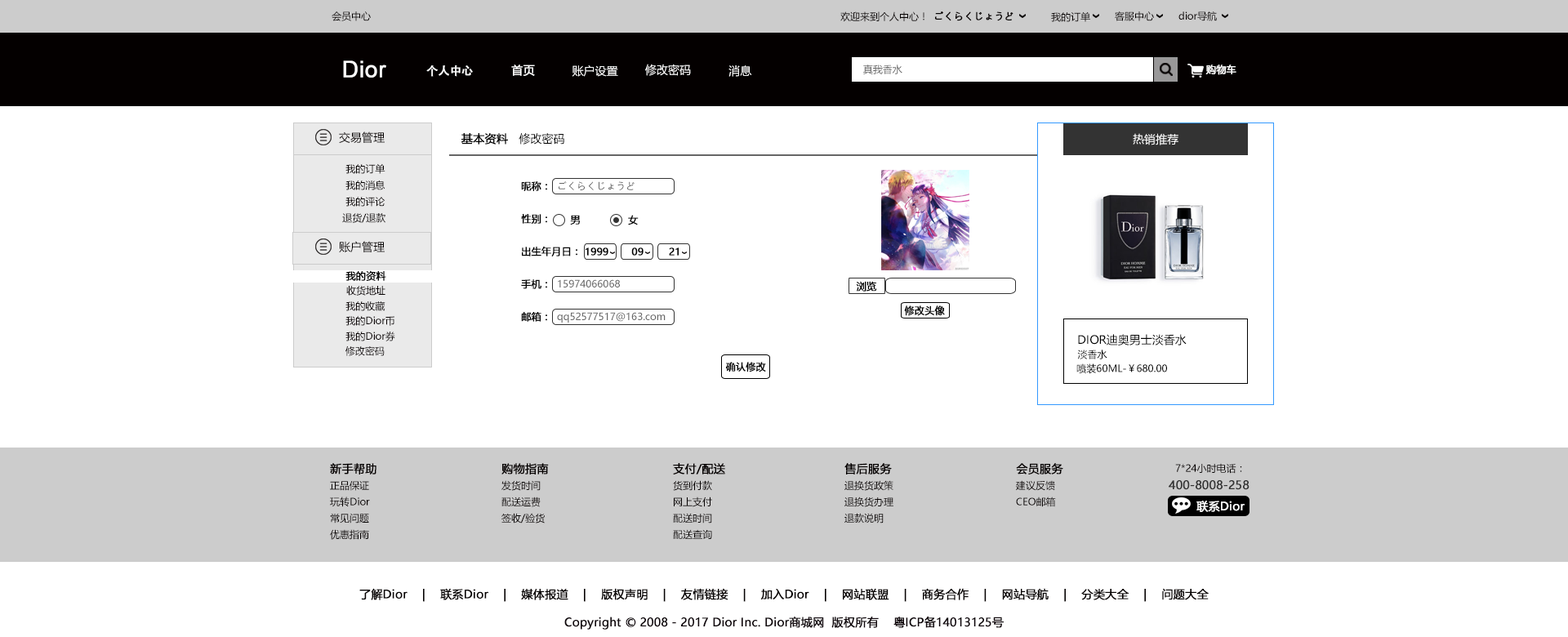
<style>
.page{position:relative;width:1568px;height:637px;background:#ffffff}
.page>*{position:absolute;margin:0}
.t1{font:9.8px "MicrosoftYaHei";color:#040000}
.t2{font:9.8px "MicrosoftYaHei";color:#040000;font-weight:bold}
.t3{font:22.9px "ArialMT";color:#ffffff;font-weight:bold}
.t4{font:11.4px "AdobeHeitiStd-Regular";color:#ffffff;font-weight:bold}
.t5{font:11.4px "MicrosoftYaHei";color:#ffffff;font-weight:bold}
.t6{font:11.4px "MicrosoftYaHei";color:#ffffff}
.t7{font:9.8px "MicrosoftYaHei";color:#666666}
.t8{font:9.8px "MicrosoftYaHei";color:#ffffff;font-weight:bold}
.t9{font:11.4px "MicrosoftYaHei";color:#040000}
.t10{font:11.4px "MicrosoftYaHei";color:#000000;font-weight:bold}
.t11{font:11.4px "MicrosoftYaHei";color:#000000}
.t12{font:9.8px "MicrosoftYaHei";color:#000000;font-weight:bold}
.t13{font:9.8px "MicrosoftYaHei";color:#010101;font-weight:bold}
.t14{font:9.8px "MicrosoftYaHei";color:#060001}
.t15{font:9.8px "MicrosoftYaHei";color:#000000}
.t16{font:11.4px "MicrosoftYaHei";color:#040000;font-weight:bold}
.t17{font:11.4px "MicrosoftYaHei";color:#333333;font-weight:bold}
</style>
<div class="page">
<p class="t1" style="left:332px;top:11px;width:39px;height:10px">会员中心</p>
<p class="t1" style="left:840px;top:11px;width:84px;height:11px">欢迎来到个人中心！</p>
<p class="t2" style="left:935px;top:11px;width:78px;height:10px">ごくらくじょうど</p>
<p class="t1" style="left:1051px;top:11px;width:39px;height:11px">我的订单</p>
<p class="t1" style="left:1115px;top:11px;width:39px;height:10px">客服中心</p>
<p class="t1" style="left:1178px;top:11px;width:39px;height:10px">dior导航</p>
<p class="t3" style="left:343px;top:60px;width:43px;height:18px">Dior</p>
<p class="t4" style="left:426px;top:65px;width:47px;height:12px">个人中心</p>
<p class="t5" style="left:511px;top:65px;width:24px;height:11px">首页</p>
<p class="t6" style="left:572px;top:65px;width:46px;height:12px">账户设置</p>
<p class="t6" style="left:645px;top:64px;width:46px;height:12px">修改密码</p>
<p class="t6" style="left:728px;top:65px;width:24px;height:12px">消息</p>
<p class="t7" style="left:863px;top:65px;width:39px;height:9px">真我香水</p>
<p class="t8" style="left:1205px;top:65px;width:31px;height:10px">购物车</p>
<p class="t9" style="left:339px;top:131px;width:46px;height:12px">交易管理</p>
<p class="t10" style="left:461px;top:133px;width:47px;height:12px">基本资料</p>
<p class="t11" style="left:519px;top:133px;width:45px;height:12px">修改密码</p>
<p class="t6" style="left:1133px;top:133px;width:45px;height:12px">热销推荐</p>
<p class="t1" style="left:345px;top:163px;width:40px;height:11px">我的订单</p>
<p class="t1" style="left:345px;top:180px;width:40px;height:10px">我的消息</p>
<p class="t12" style="left:521px;top:181px;width:26px;height:10px">昵称：</p>
<p class="t7" style="left:559px;top:181px;width:76px;height:9px">ごくらくじょうど</p>
<p class="t1" style="left:345px;top:197px;width:40px;height:10px">我的评论</p>
<p class="t1" style="left:342px;top:213px;width:43px;height:10px">退货/退款</p>
<p class="t12" style="left:521px;top:214px;width:26px;height:10px">性别：</p>
<p class="t12" style="left:570px;top:215px;width:10px;height:10px">男</p>
<p class="t12" style="left:628px;top:215px;width:11px;height:10px">女</p>
<p class="t9" style="left:339px;top:241px;width:46px;height:11px">账户管理</p>
<p class="t12" style="left:522px;top:246px;width:55px;height:10px">出生年月日：</p>
<p class="t12" style="left:586px;top:247px;width:22px;height:9px">1999</p>
<p class="t12" style="left:631px;top:247px;width:13px;height:9px">09</p>
<p class="t12" style="left:669px;top:247px;width:10px;height:9px">21</p>
<p class="t13" style="left:345px;top:270px;width:41px;height:11px">我的资料</p>
<p class="t12" style="left:521px;top:279px;width:26px;height:10px">手机：</p>
<p class="t7" style="left:558px;top:279px;width:62px;height:8px">15974066068</p>
<p class="t12" style="left:856px;top:281px;width:21px;height:11px">浏览</p>
<p class="t14" style="left:346px;top:286px;width:39px;height:10px">收货地址</p>
<p class="t14" style="left:345px;top:301px;width:40px;height:10px">我的收藏</p>
<p class="t12" style="left:904px;top:305px;width:41px;height:11px">修改头像</p>
<p class="t14" style="left:345px;top:316px;width:49px;height:10px">我的Dior币</p>
<p class="t12" style="left:521px;top:312px;width:26px;height:10px">邮箱：</p>
<p class="t7" style="left:557px;top:312px;width:109px;height:11px">qq52577517@163.com</p>
<p class="t14" style="left:345px;top:332px;width:50px;height:9px">我的Dior券</p>
<p class="t11" style="left:1078px;top:334px;width:109px;height:11px">DIOR迪奥男士淡香水</p>
<p class="t14" style="left:345px;top:346px;width:40px;height:10px">修改密码</p>
<p class="t15" style="left:1077px;top:350px;width:30px;height:9px">淡香水</p>
<p class="t12" style="left:725px;top:362px;width:41px;height:10px">确认修改</p>
<p class="t15" style="left:1076px;top:363px;width:91px;height:11px">喷装60ML-￥680.00</p>
<p class="t16" style="left:330px;top:463px;width:46px;height:11px">新手帮助</p>
<p class="t16" style="left:501px;top:463px;width:48px;height:11px">购物指南</p>
<p class="t16" style="left:673px;top:463px;width:52px;height:11px">支付/配送</p>
<p class="t16" style="left:844px;top:463px;width:48px;height:11px">售后服务</p>
<p class="t16" style="left:1016px;top:463px;width:47px;height:11px">会员服务</p>
<p class="t1" style="left:1175px;top:463px;width:67px;height:11px">7*24小时电话：</p>
<p class="t1" style="left:330px;top:481px;width:39px;height:10px">正品保证</p>
<p class="t1" style="left:501px;top:480px;width:40px;height:11px">发货时间</p>
<p class="t1" style="left:673px;top:480px;width:39px;height:11px">货到付款</p>
<p class="t1" style="left:844px;top:480px;width:49px;height:11px">退换货政策</p>
<p class="t1" style="left:1016px;top:480px;width:39px;height:11px">建议反馈</p>
<p class="t17" style="left:1169px;top:480px;width:81px;height:10px">400-8008-258</p>
<p class="t1" style="left:330px;top:497px;width:40px;height:10px">玩转Dior</p>
<p class="t1" style="left:501px;top:497px;width:40px;height:10px">配送运费</p>
<p class="t1" style="left:674px;top:497px;width:38px;height:10px">网上支付</p>
<p class="t1" style="left:844px;top:497px;width:49px;height:10px">退换货办理</p>
<p class="t1" style="left:1016px;top:497px;width:40px;height:10px">CEO邮箱</p>
<p class="t5" style="left:1196px;top:501px;width:49px;height:11px">联系Dior</p>
<p class="t1" style="left:330px;top:513px;width:39px;height:10px">常见问题</p>
<p class="t1" style="left:501px;top:513px;width:44px;height:10px">签收/验货</p>
<p class="t1" style="left:673px;top:513px;width:39px;height:10px">配送时间</p>
<p class="t1" style="left:844px;top:513px;width:40px;height:10px">退款说明</p>
<p class="t1" style="left:330px;top:529px;width:39px;height:11px">优惠指南</p>
<p class="t1" style="left:673px;top:529px;width:39px;height:10px">配送查询</p>
<p class="t16" style="left:359px;top:588px;width:850px;height:14px">了解Dior    |    联系Dior    |    媒体报道    |    版权声明    |    友情链接    |    加入Dior    |    网站联盟    |    商务合作    |    网站导航    |    分类大全    |    问题大全</p>
<p class="t10" style="left:564px;top:616px;width:440px;height:14px">Copyright © 2008 - 2017 Dior Inc. Dior商城网  版权所有    粤ICP备14013125号</p>
</div>
